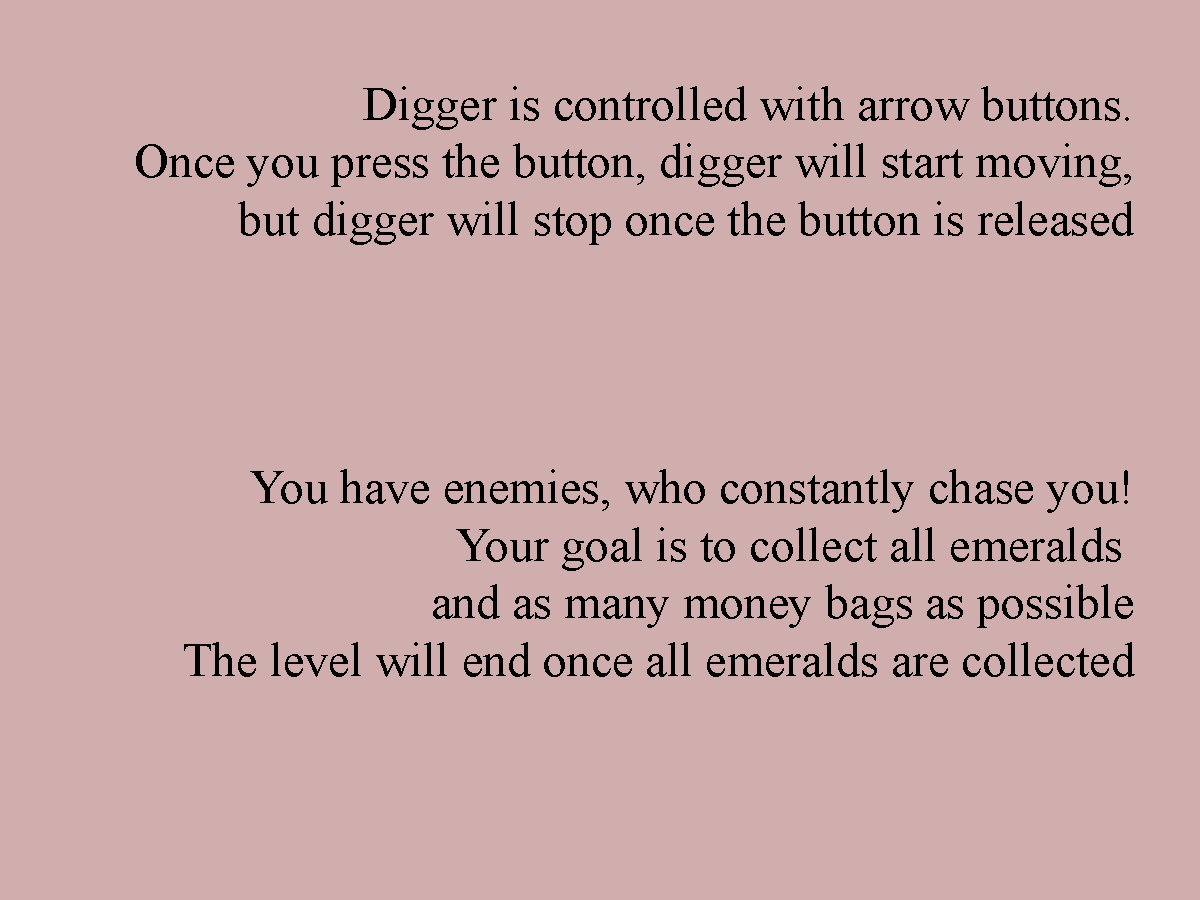
<style>
.page{position:relative;width:1200px;height:900px;background:#d0aeae}
.page>*{position:absolute;margin:0}
.t1{font:48px "TimesNewRomanPSMT";color:#000000}
</style>
<div class="page">
<p class="t1" style="left:136px;top:86px;width:998px;height:159px;text-align:right">Digger is controlled with arrow buttons. <br>Once you press the button, digger will start moving, <br>but digger will stop once the button is released</p>
<p class="t1" style="left:184px;top:469px;width:951px;height:208px;text-align:right">You have enemies, who constantly chase you!<br>Your goal is to collect all emeralds <br>and as many money bags as possible<br>The level will end once all emeralds are collected</p>
</div>
